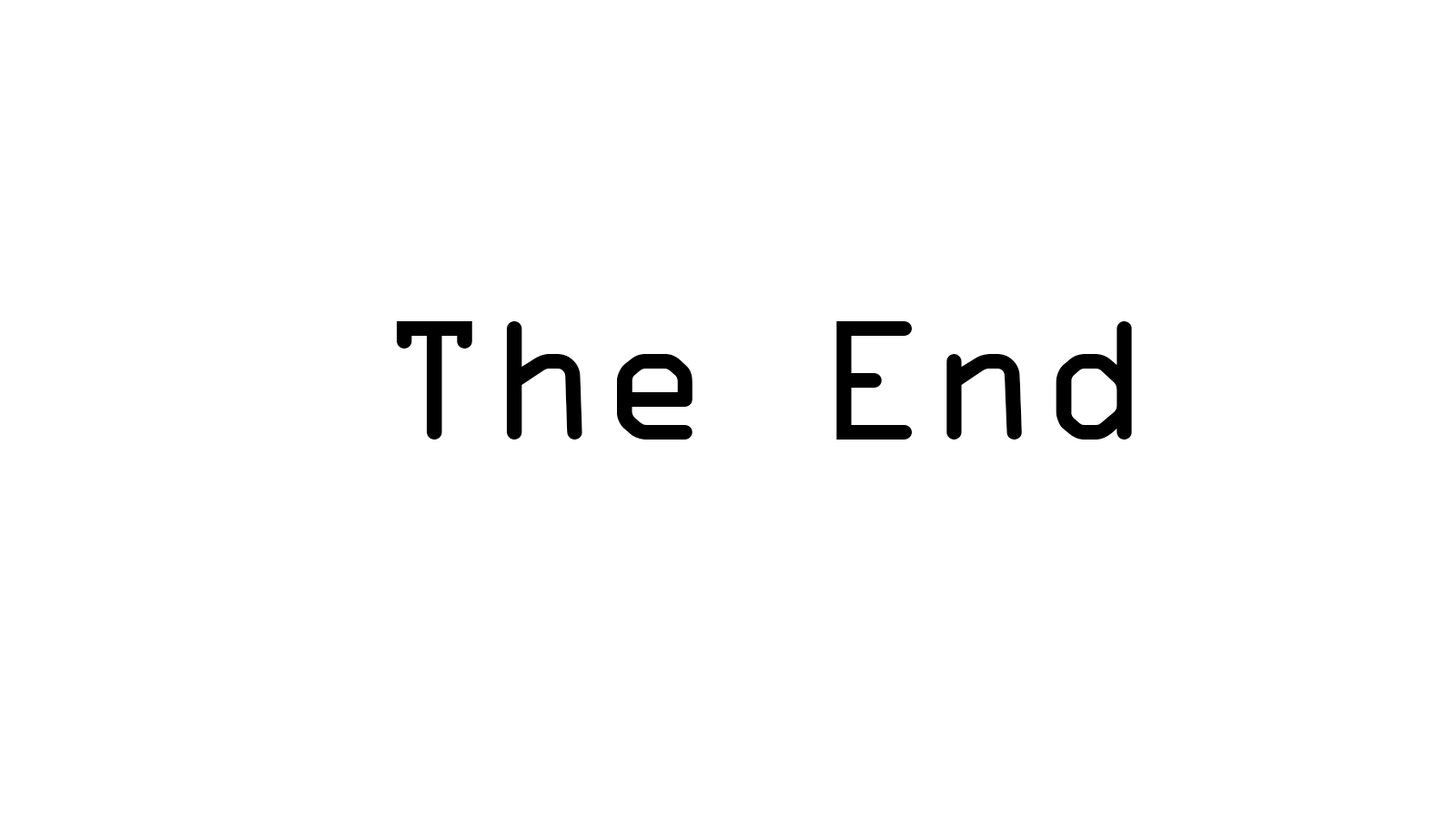
<style>
.page{position:relative;width:1456px;height:819px;background:#ffffff}
.page>*{position:absolute;margin:0}
.t1{font:182px "OCRAExtended";color:#000000}
</style>
<div class="page">
<p class="t1" style="left:397px;top:321px;width:735px;height:119px">The End</p>
</div>
